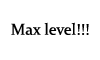
<style>
.page{position:relative;width:100px;height:60px;background:#ffffff}
.page>*{position:absolute;margin:0}
.t1{font:16px "Constantia";color:#000000}
</style>
<div class="page">
<p class="t1" style="left:11px;top:22px;width:78px;height:13px">Max level!!!</p>
</div>
